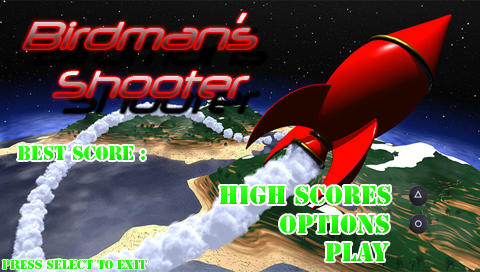
<style>
.page{position:relative;width:480px;height:272px}
.page>*{position:absolute;margin:0}
.t1{font:49.6px "Neuropol";scale:0.92 1}
.t2{font:48px "Neuropol";scale:0.93 1}
.t3{font:18px "StencilStd"}
.t4{font:24px "StencilStd"}
.t5{font:12px "StencilStd";color:#1efe00}
</style>
<div class="page">
<p class="t1" style="left:23px;top:13px;width:234px;height:36px">Birdman’s</p>
<p class="t2" style="left:53px;top:71px;width:197px;height:26px">Shooter</p>
<p class="t3" style="left:18px;top:146px;width:127px;height:14px">Best Score :</p>
<p class="t4" style="left:219px;top:186px;width:172px;height:18px">High Scores</p>
<p class="t4" style="left:280px;top:215px;width:109px;height:18px">options</p>
<p class="t4" style="left:325px;top:243px;width:64px;height:18px">Play</p>
<p class="t5" style="left:2px;top:260px;width:145px;height:9px">Press SELECT To Exit</p>
</div>
